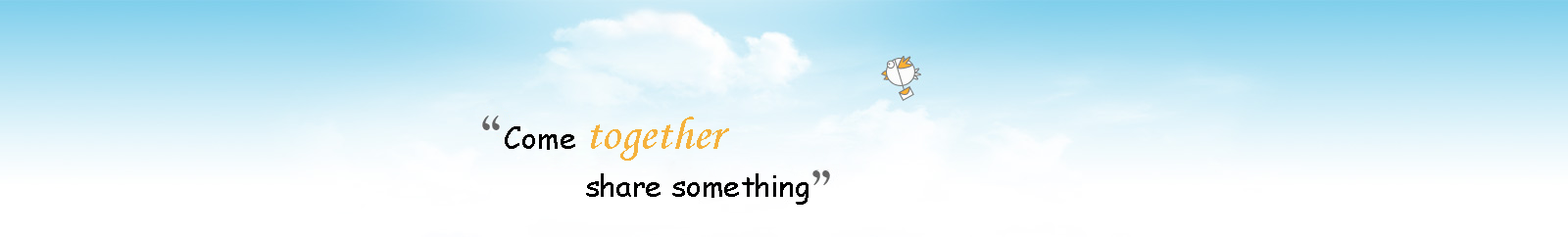
<style>
.page{position:relative;width:1568px;height:237px}
.page>*{position:absolute;margin:0}
.t1{font:47px "MonotypeCorsiva";letter-spacing:0.01em;color:#f5b23d}
.t2{font:29.4px "ComicSansMS";letter-spacing:0.01em;color:#000000}
</style>
<div class="page">
<p class="t1" style="left:505px;top:117px;width:224px;height:44px"><span class="t2">Come </span>together</p>
<p class="t2" style="left:586px;top:173px;width:222px;height:32px">share something</p>
</div>
